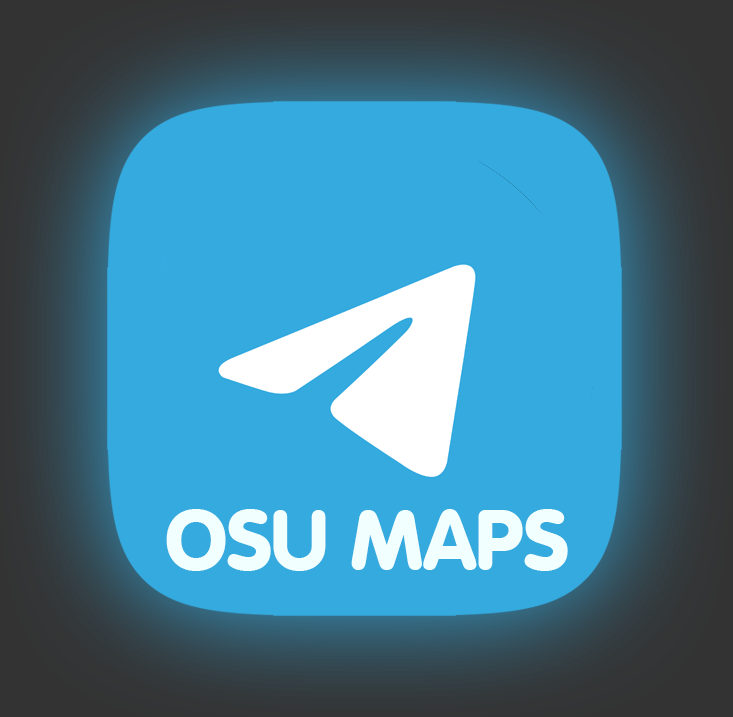
<style>
.page{position:relative;width:733px;height:717px;background:#34aadf}
.page>*{position:absolute;margin:0}
.t1{font:83.6px "VAGWorld-Bold";color:#f2ffff}
</style>
<div class="page">
<p class="t1" style="left:166px;top:509px;width:402px;height:62px">OSU MAPS</p>
</div>
